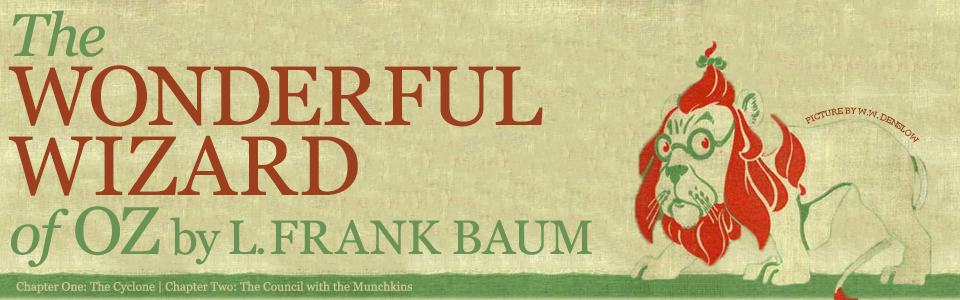
<style>
.page{position:relative;width:960px;height:300px}
.page>*{position:absolute;margin:0}
.t1{font:48px/59px "Georgia";color:#6a9455}
.t2{font:60px/69px "Georgia-Italic";letter-spacing:-0.04em;color:#6a9455}
.t3{font:84px/69px "Georgia";letter-spacing:-0.02em;color:#9b3f1e}
.t4{font:84px/70px "Georgia";letter-spacing:0.02em;color:#9b3f1e}
.t5{font:60px/59px "Georgia-Italic";letter-spacing:-0.04em;color:#6a9455}
.t6{font:67px/59px "Georgia";letter-spacing:-0.04em;color:#6a9455}
.t7{font:48px/59px "Georgia";letter-spacing:-0.04em;color:#6a9455}
.t8{font:7.9px "Georgia";letter-spacing:-0.02em;color:#9b3f1e}
.t9{font:12px "Georgia";color:#cbc790}
</style>
<div class="page">
<p class="t1" style="left:8px;top:10px;width:584px;height:257px"><span class="t2">The<br></span><span class="t3">WONDERFUL <br></span><span class="t4">WIZARD<br></span><span class="t5">of </span><span class="t6">OZ </span><span class="t7">by L. </span>FRANK BAUM</p>
<p class="t8" style="left:805px;top:107px;width:115px;height:36px;rotate:11deg">PICTURE BY W.W. DENSLOW</p>
<p class="t9" style="left:16px;top:281px;width:397px;height:13px">Chapter One: The Cyclone | Chapter Two: The Council with the Munchkins</p>
</div>
